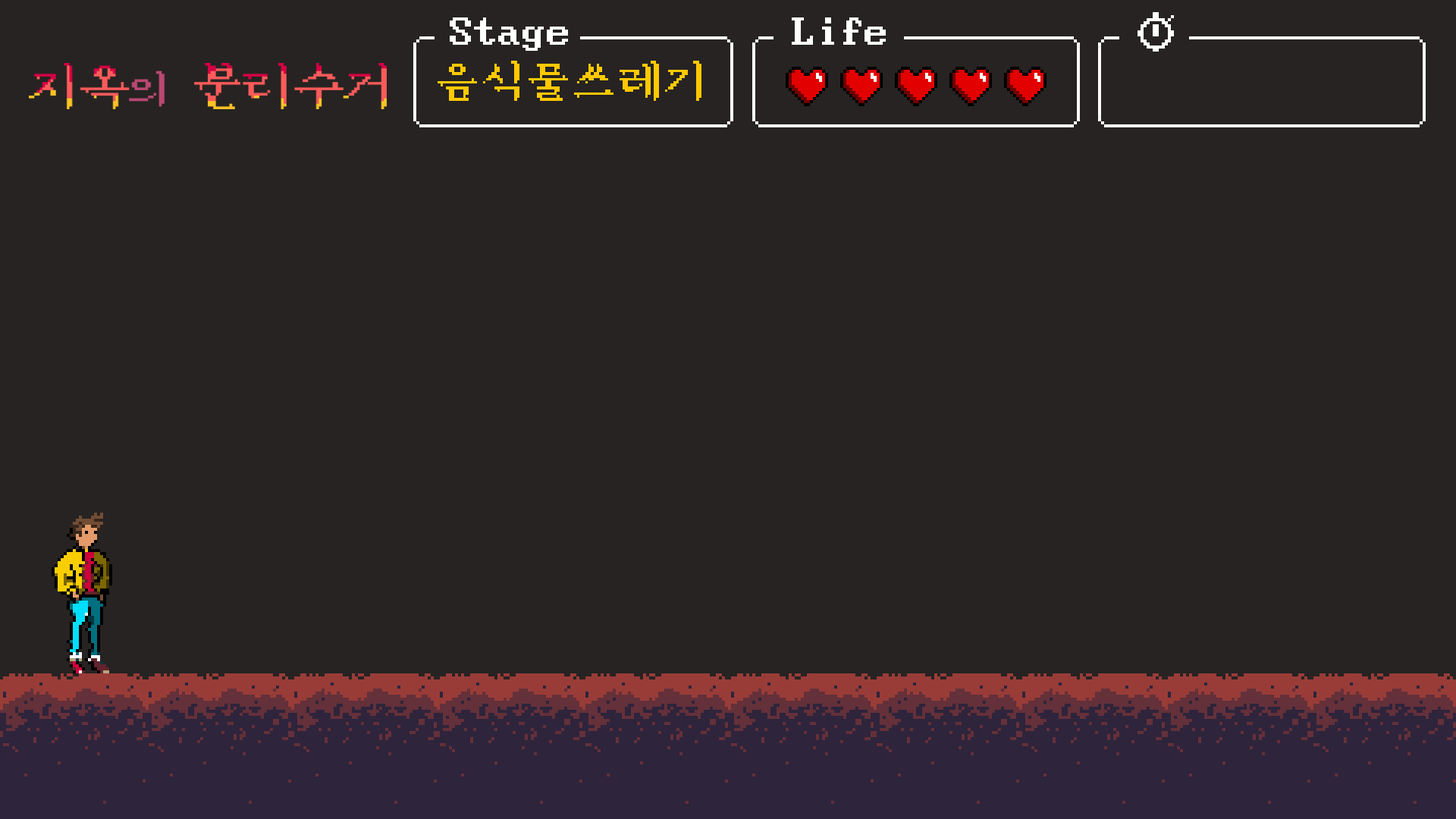
<style>
.page{position:relative;width:1456px;height:819px;background:#262322}
.page>*{position:absolute;margin:0}
.t1{font:48.5px "DOSMyungjo";color:#fffffe}
.t2{font:45.5px "DOSMyungjo";color:#ffc800}
</style>
<div class="page">
<p class="t1" style="left:450px;top:17px;width:118px;height:34px">Stage</p>
<p class="t1" style="left:792px;top:17px;width:94px;height:28px">Life</p>
<p class="t2" style="left:438px;top:61px;width:263px;height:40px">음식물쓰레기</p>
</div>
